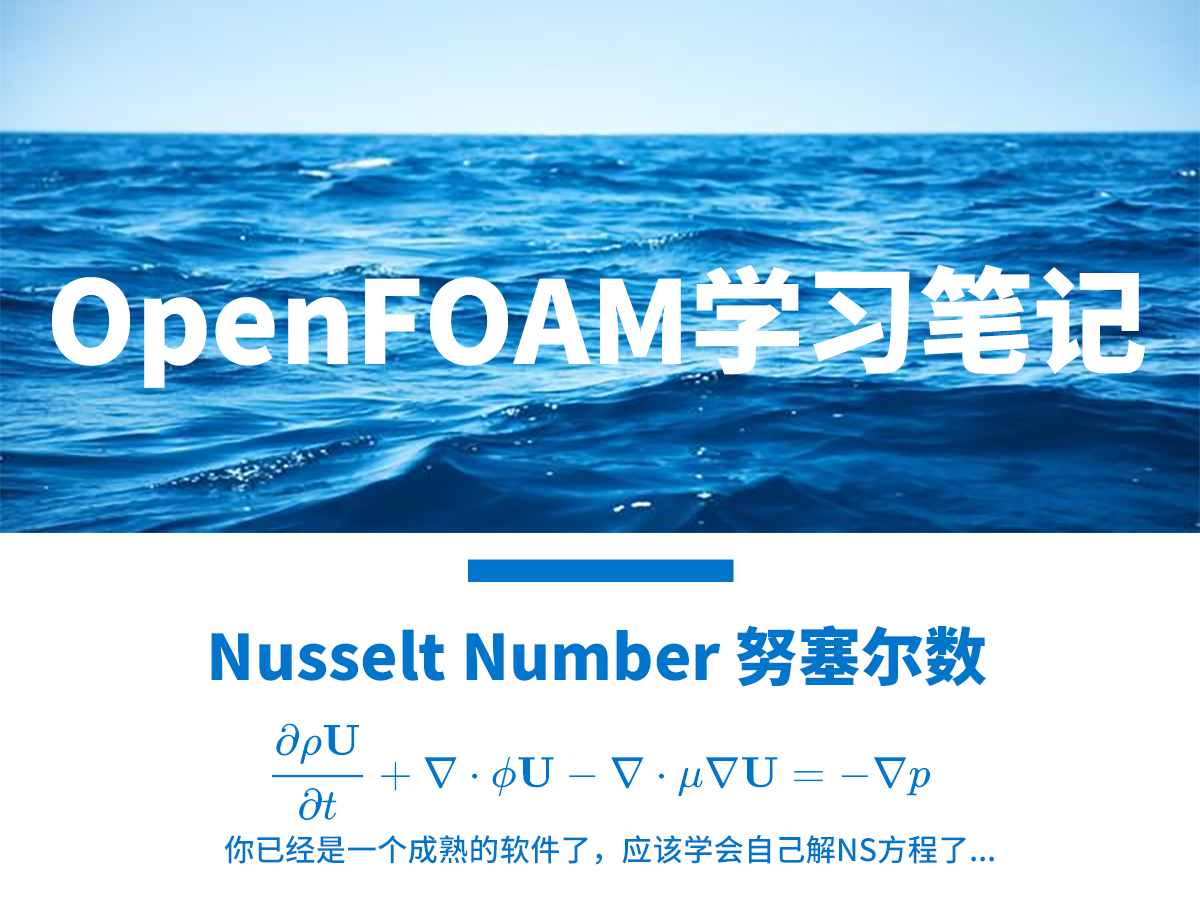
<style>
.page{position:relative;width:1200px;height:900px;background:#ffffff}
.page>*{position:absolute;margin:0}
.t1{font:196.3px "SourceHanSansSC-Heavy";color:#ffffff}
.t2{font:108px "SourceHanSansSC-Heavy";color:#0075cc}
.t3{font:52.5px "SourceHanSansSC-Medium";color:#0075cc}
</style>
<div class="page">
<p class="t1" style="left:52px;top:264px;width:1093px;height:124px">OpenFOAM学习笔记</p>
<p class="t2" style="left:211px;top:625px;width:776px;height:62px">Nusselt Number 努塞尔数</p>
<p class="t3" style="left:224px;top:835px;width:770px;height:30px">你已经是一个成熟的软件了，应该学会自己解NS方程了...</p>
</div>
